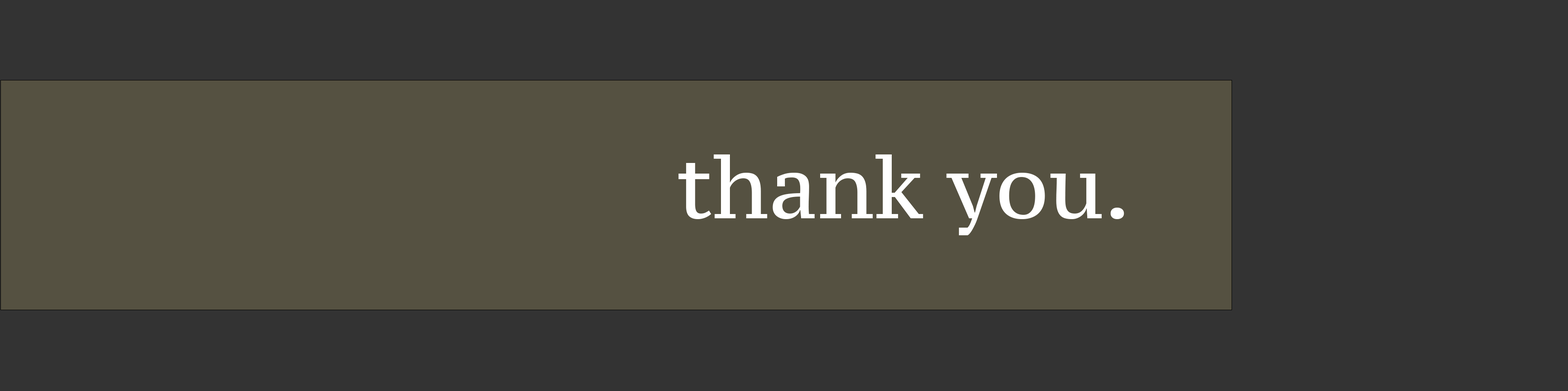
<style>
.page{position:relative;width:1568px;height:391px;background:#333333}
.page>*{position:absolute;margin:0}
.t1{font:85.2px "PTSerif-Caption";color:#ffffff}
</style>
<div class="page">
<p class="t1" style="left:678px;top:155px;width:446px;height:80px">thank you.</p>
</div>
